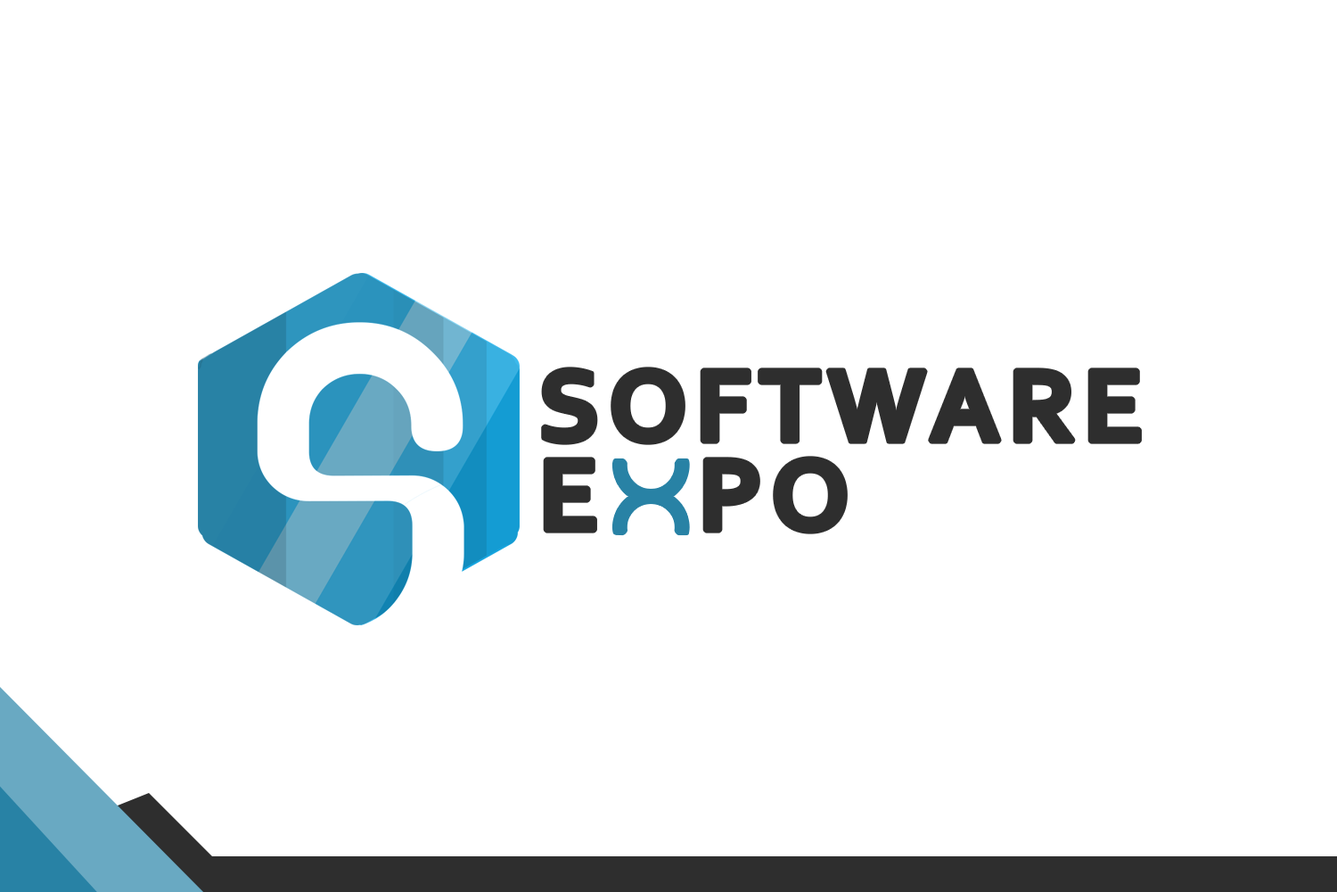
<style>
.page{position:relative;width:1337px;height:892px;background:#ffffff}
.page>*{position:absolute;margin:0}
.t1{font:107px/89.2px "Corbel-Bold";letter-spacing:0.05em;color:#2e2e2e;font-weight:bold}
.t2{font:135.5px "JKAbode-LightDemo";letter-spacing:0.05em;color:#2882a5;font-weight:bold}
</style>
<div class="page">
<p class="t1" style="left:543px;top:368px;width:597px;height:164px;text-align:right">SOFTWARE<br> E   PO</p>
<p class="t2" style="left:614px;top:460px;width:73px;height:73px">X</p>
</div>
